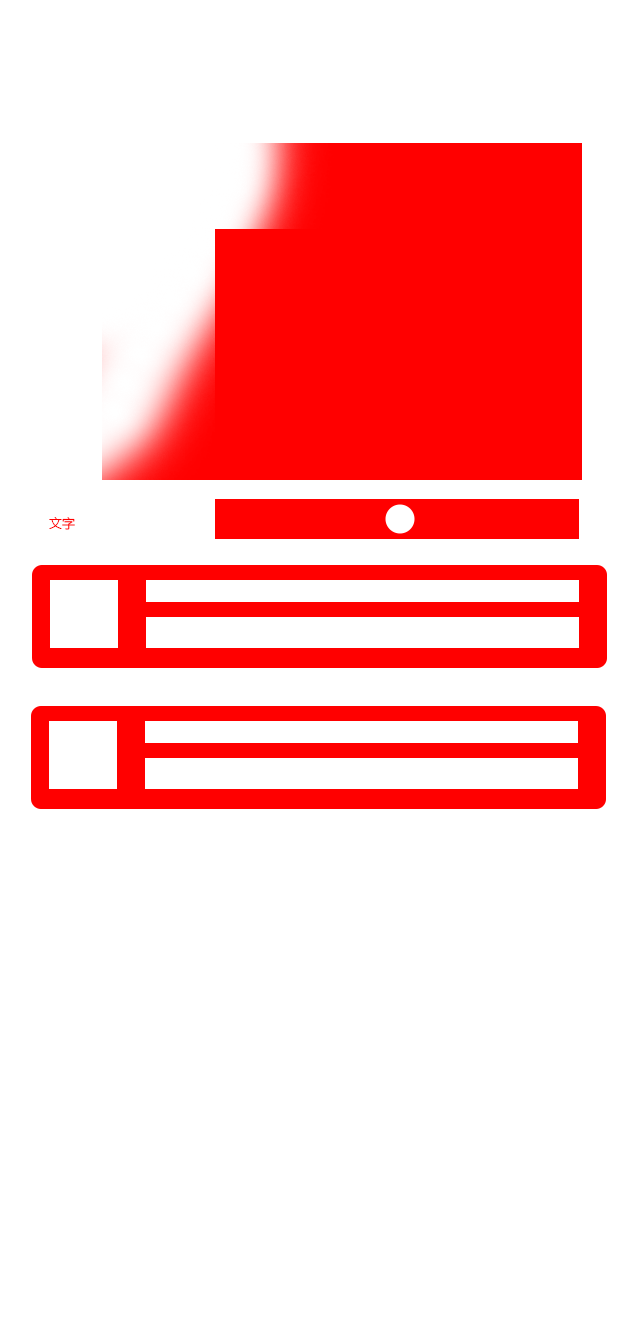
<style>
.page{position:relative;width:640px;height:1336px;background:#ffffff}
.page>*{position:absolute;margin:0}
.t1{font:12.9px "MicrosoftYaHei";color:#ff0000}
</style>
<div class="page">
<p class="t1" style="left:49px;top:517px;width:26px;height:13px">文字</p>
</div>
